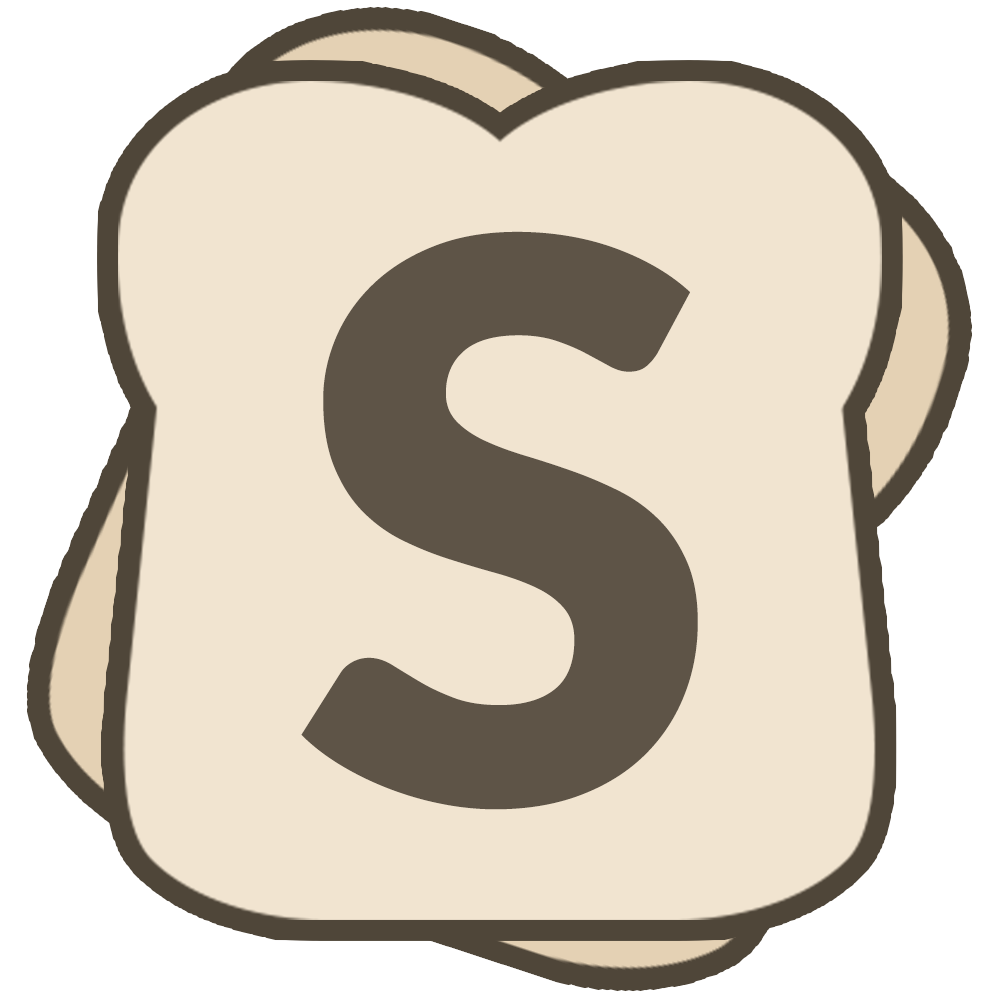
<style>
.page{position:relative;width:1000px;height:1000px;background:#f1e4d0}
.page>*{position:absolute;margin:0}
.t1{font:775.2px "Lato-Black";color:#5e5447;text-transform:uppercase}
</style>
<div class="page">
<p class="t1" style="left:301px;top:231px;width:397px;height:579px">S</p>
</div>
